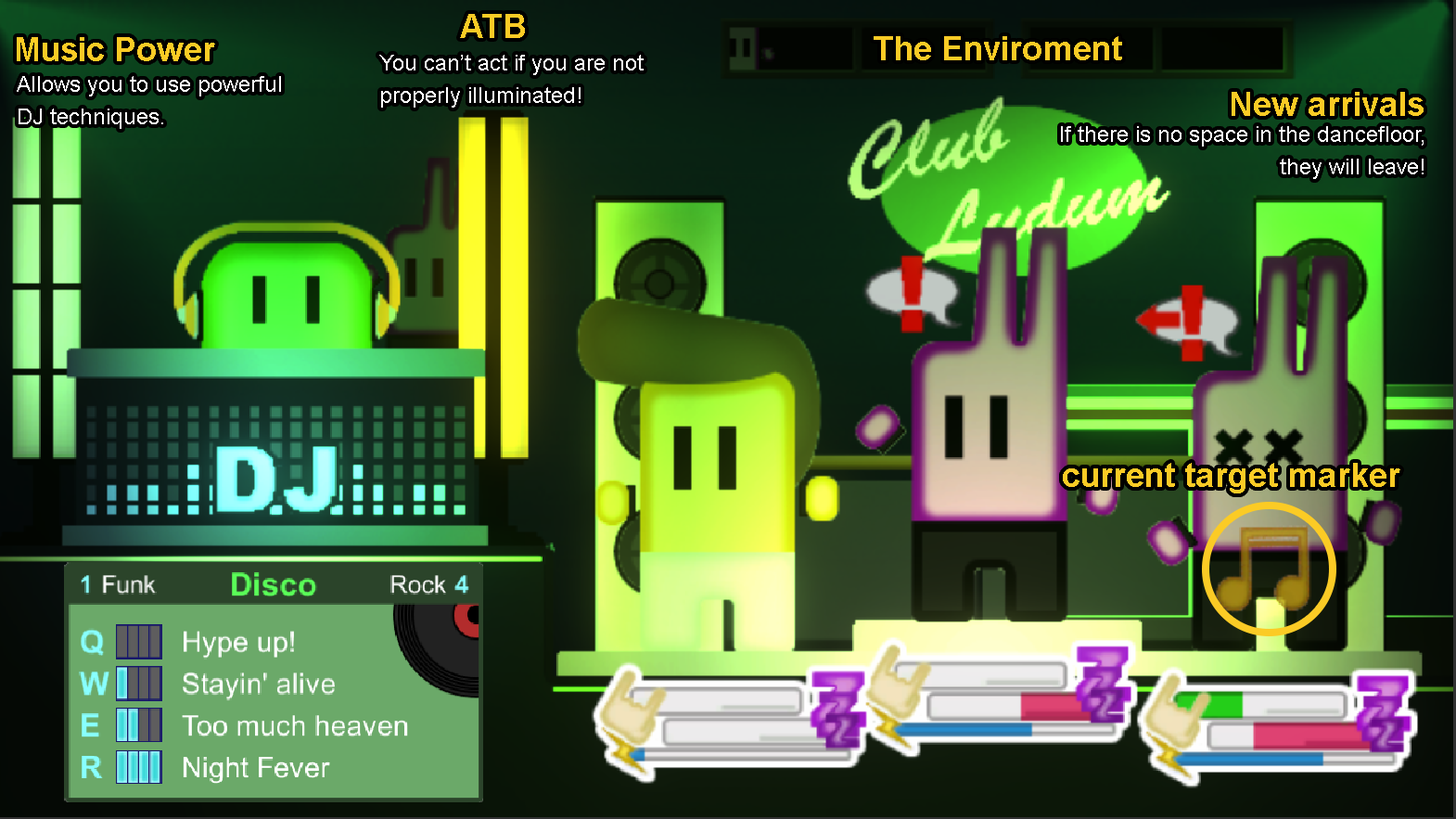
<style>
.page{position:relative;width:1456px;height:819px}
.page>*{position:absolute;margin:0}
.t1{font:33.4px "Arial-BoldMT";color:#fbcb25}
.t2{font:22.3px/32.5px "ArialMT";color:#ffffff}
</style>
<div class="page">
<p class="t1" style="left:460px;top:14px;width:65px;height:24px">ATB</p>
<p class="t1" style="left:17px;top:37px;width:198px;height:24px">Music Power</p>
<p class="t1" style="left:874px;top:36px;width:248px;height:24px">The Enviroment</p>
<p class="t2" style="left:379px;top:55px;width:265px;height:53px">You can’t act if you are not<br>properly illuminated!</p>
<p class="t2" style="left:17px;top:76px;width:264px;height:53px">Allows you to use powerful<br>DJ techniques.</p>
<p class="t1" style="left:1232px;top:92px;width:192px;height:24px">New arrivals</p>
<p class="t2" style="left:1061px;top:126px;width:363px;height:53px;text-align:right">If there is no space in the dancefloor,<br>they will leave!</p>
<p class="t1" style="left:1063px;top:463px;width:337px;height:30px">current target marker</p>
</div>
